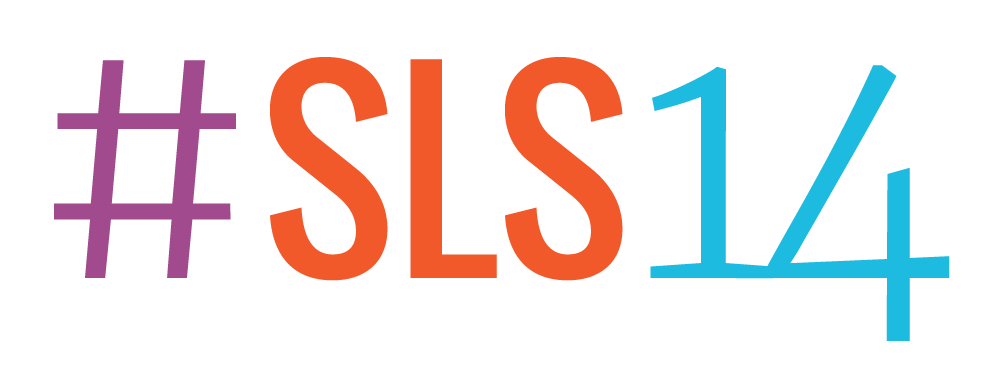
<style>
.page{position:relative;width:994px;height:380px;background:#ffffff}
.page>*{position:absolute;margin:0}
.t1{font:250px "Oswald";color:#f1592b}
.t2{font:329.2px "Merriweather-Light";color:#a14a8e}
.t3{font:341.7px "Merriweather-Light";letter-spacing:-0.09em;color:#1dbbdf}
</style>
<div class="page">
<p class="t1" style="left:54px;top:57px;width:896px;height:284px"><span class="t2">#</span>SLS<span class="t3">14</span></p>
</div>
